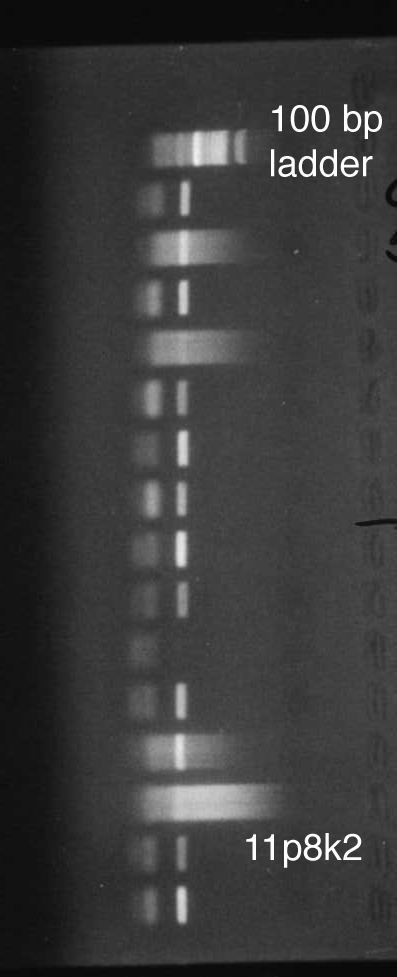
<style>
.page{position:relative;width:397px;height:977px}
.page>*{position:absolute;margin:0}
.t1{font:37.5px "Helvetica";color:#fdfdfd}
</style>
<div class="page">
<p class="t1" style="left:271px;top:104px;width:111px;height:73px">100 bp <br>ladder</p>
<p class="t1" style="left:246px;top:833px;width:116px;height:35px">11p8k2</p>
</div>
